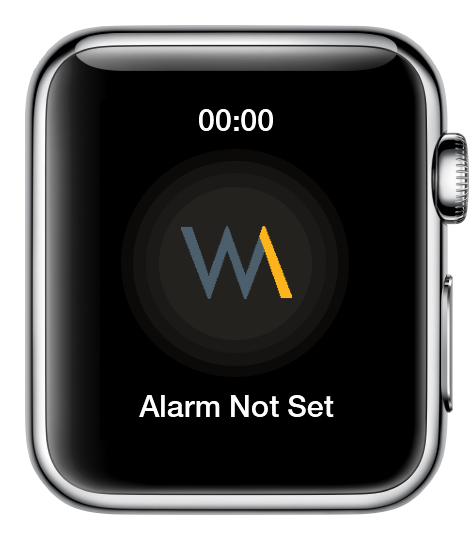
<style>
.page{position:relative;width:472px;height:540px;background:#000000}
.page>*{position:absolute;margin:0}
.t1{font:30px "HelveticaNeue-Medium";letter-spacing:0.004em;color:#ffffff}
.t2{font:30px "HelveticaNeue-Medium";letter-spacing:0.004em;color:#fefefe}
</style>
<div class="page">
<p class="t1" style="left:199px;top:109px;width:74px;height:22px">00:00</p>
<p class="t2" style="left:139px;top:395px;width:195px;height:22px">Alarm Not Set</p>
</div>
